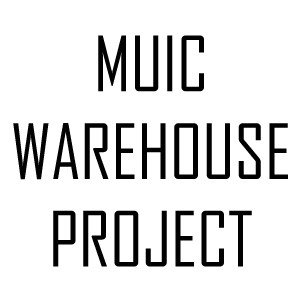
<style>
.page{position:relative;width:300px;height:300px;background:#ffffff}
.page>*{position:absolute;margin:0}
.t1{font:73px "AgencyFB-Reg";color:#010101}
</style>
<div class="page">
<p class="t1" style="left:13px;top:35px;width:275px;height:232px;text-align:center">MUIC<br>WAREHOUSE<br>PROJECT</p>
</div>
